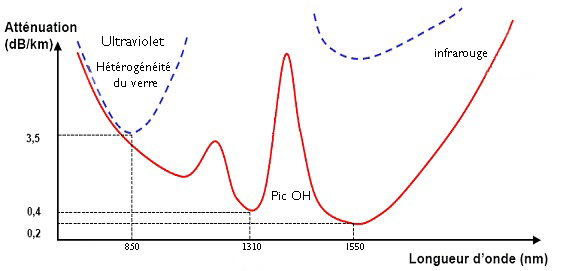
<style>
.page{position:relative;width:587px;height:271px;background:#ffffff}
.page>*{position:absolute;margin:0}
.t1{font:15px "GillSansMT";color:#000000}
.t2{font:13.3px "GillSansMT";color:#000000}
.t3{font:10px "TimesNewRomanPSMT";color:#000000}
.t4{font:10px "GillSansMT";color:#000000}
</style>
<div class="page">
<p class="t1" style="left:102px;top:36px;width:62px;height:10px">Ultraviolet</p>
<p class="t2" style="left:435px;top:48px;width:52px;height:12px">infrarouge</p>
<p class="t2" style="left:97px;top:62px;width:73px;height:25px;text-align:center">Hétérogénéité <br>du verre</p>
<p class="t2" style="left:272px;top:191px;width:38px;height:9px">Pic OH</p>
<p class="t3" style="left:125px;top:243px;width:14px;height:7px">850</p>
<p class="t3" style="left:243px;top:243px;width:18px;height:7px">1310</p>
<p class="t4" style="left:347px;top:243px;width:17px;height:7px">1550</p>
</div>
